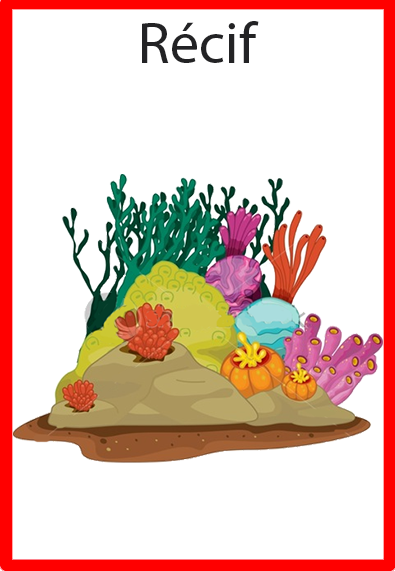
<style>
.page{position:relative;width:395px;height:571px;background:#ffffff}
.page>*{position:absolute;margin:0}
.t1{font:58.3px "MyriadPro-Regular";color:#232325}
</style>
<div class="page">
<p class="t1" style="left:142px;top:21px;width:117px;height:42px">Récif</p>
</div>
